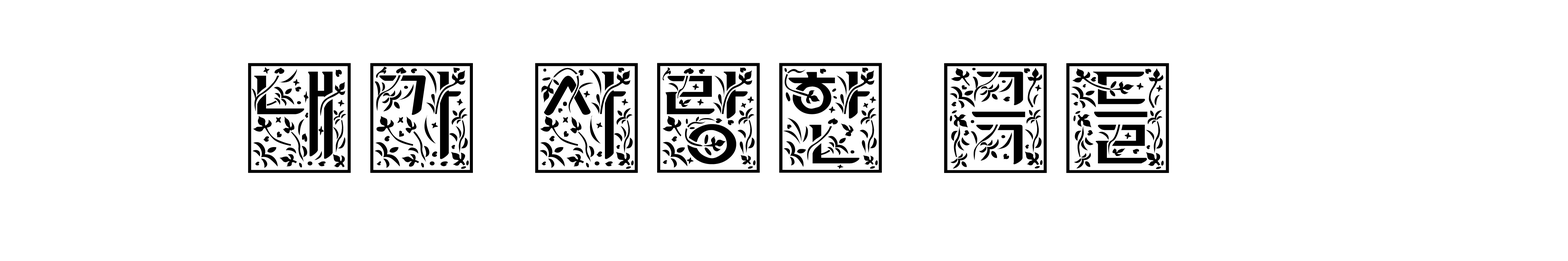
<style>
.page{position:relative;width:1568px;height:261px;background:#ffffff}
.page>*{position:absolute;margin:0}
.t1{font:122.2px "Yj-INITIALPOSITIVE-Medium";color:#000000}
</style>
<div class="page">
<p class="t1" style="left:248px;top:63px;width:921px;height:110px">내가 사랑한 극들</p>
</div>
